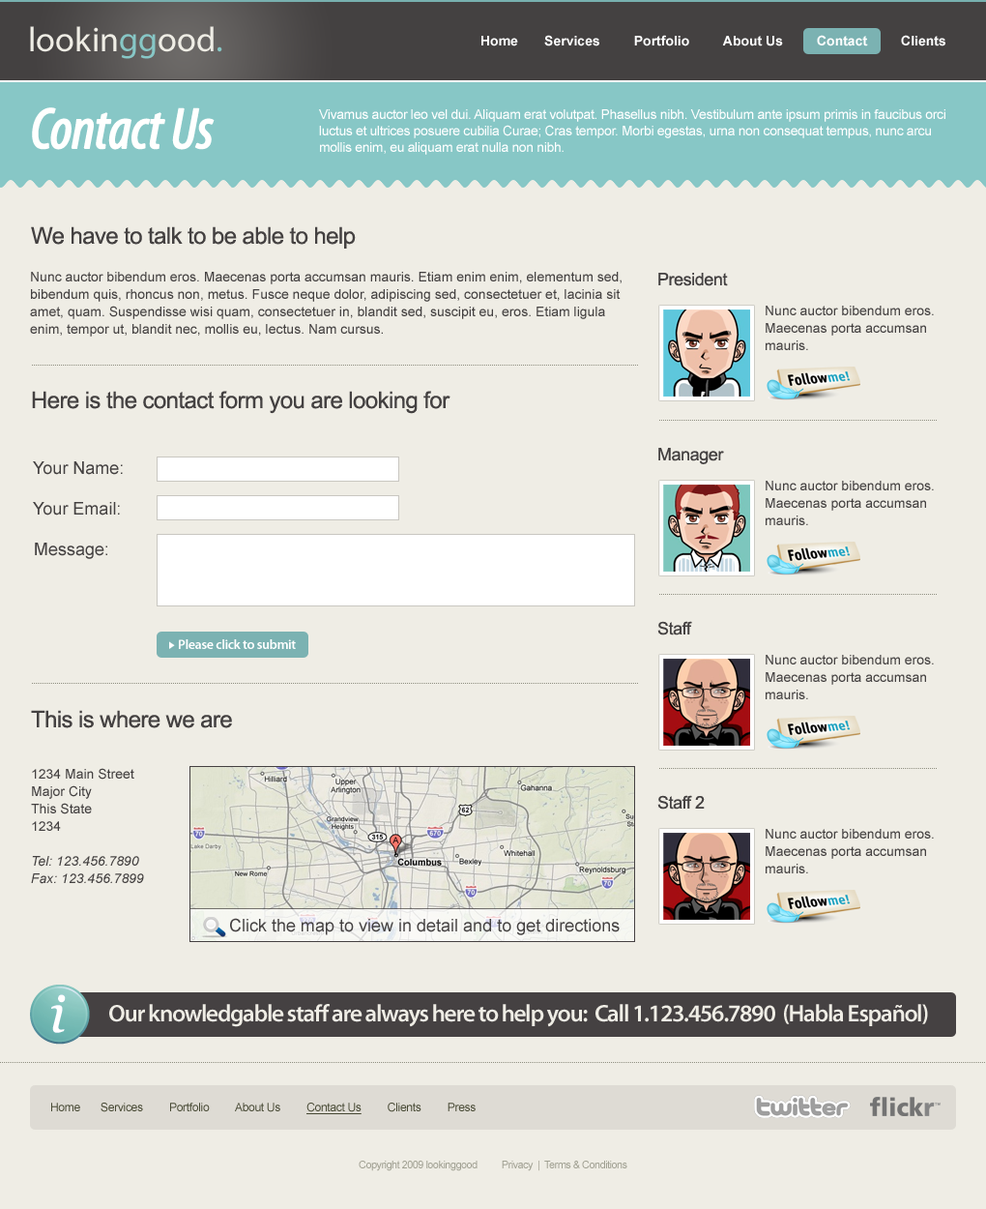
<style>
.page{position:relative;width:986px;height:1209px;background:#efede5}
.page>*{position:absolute;margin:0}
.t1{font:34.8px "MyriadPro-Regular";color:#efede5}
.t2{font:34.8px "MyriadPro-Regular";color:#87c7c6}
.t3{font:13.5px "Arial-BoldMT";color:#ffffff}
.t4{font:58px "MyriadPro-CondIt";letter-spacing:-0.025em;color:#fffffe;font-weight:bold}
.t5{font:13.5px "ArialMT";letter-spacing:-0.025em;color:#ffffff}
.t6{font:23.2px "ArialMT";letter-spacing:-0.025em;color:#444141}
.t7{font:13.5px/17.4px "ArialMT";color:#444141}
.t8{font:17.4px "ArialMT";letter-spacing:-0.025em;color:#444141}
.t9{font:17.4px "ArialMT";color:#444141}
.t10{font:13.5px "MyriadPro-Semibold";letter-spacing:-0.025em;color:#ffffff}
.t11{font:13.5px/17.4px "Arial-ItalicMT";color:#444141}
.t12{font:24.2px "MyriadPro-Semibold";letter-spacing:-0.05em;color:#efede5}
.t13{font:11.6px "ArialMT";letter-spacing:-0.025em;color:#464833}
.t14{font:11.6px "ArialMT";letter-spacing:-0.025em;color:#464833;text-decoration:underline}
.t15{font:10.6px "ArialMT";letter-spacing:-0.05em;color:#a1a193}
</style>
<div class="page">
<p class="t1" style="left:30px;top:26px;width:192px;height:33px">lookin<span class="t2">gg</span>ood<span class="t2">.</span></p>
<p class="t3" style="left:482px;top:35px;width:464px;height:11px">Home       Services         Portfolio         About Us         Contact         Clients</p>
<p class="t4" style="left:32px;top:107px;width:183px;height:43px">Contact Us</p>
<p class="t5" style="left:319px;top:109px;width:627px;height:46px">Vivamus auctor leo vel dui. Aliquam erat volutpat. Phasellus nibh. Vestibulum ante ipsum primis in faucibus orci luctus et ultrices posuere cubilia Curae; Cras tempor. Morbi egestas, urna non consequat tempus, nunc arcu mollis enim, eu aliquam erat nulla non nibh.</p>
<p class="t6" style="left:31px;top:226px;width:325px;height:23px">We have to talk to be able to help</p>
<p class="t7" style="left:30px;top:272px;width:592px;height:65px">Nunc auctor bibendum eros. Maecenas porta accumsan mauris. Etiam enim enim, elementum sed, bibendum quis, rhoncus non, metus. Fusce neque dolor, adipiscing sed, consectetuer et, lacinia sit amet, quam. Suspendisse wisi quam, consectetuer in, blandit sed, suscipit eu, eros. Etiam ligula enim, tempor ut, blandit nec, mollis eu, lectus. Nam cursus.</p>
<p class="t8" style="left:659px;top:273px;width:69px;height:13px">President</p>
<p class="t7" style="left:766px;top:306px;width:168px;height:44px">Nunc auctor bibendum eros. Maecenas porta accumsan mauris.</p>
<p class="t6" style="left:32px;top:391px;width:419px;height:23px">Here is the contact form you are looking for</p>
<p class="t8" style="left:659px;top:448px;width:65px;height:16px">Manager</p>
<p class="t9" style="left:33px;top:461px;width:90px;height:14px">Your Name:</p>
<p class="t7" style="left:766px;top:481px;width:168px;height:44px">Nunc auctor bibendum eros. Maecenas porta accumsan mauris.</p>
<p class="t9" style="left:33px;top:502px;width:87px;height:13px">Your Email:</p>
<p class="t9" style="left:35px;top:543px;width:72px;height:16px">Message:</p>
<p class="t8" style="left:658px;top:621px;width:34px;height:14px">Staff</p>
<p class="t10" style="left:179px;top:639px;width:117px;height:10px">Please click to submit</p>
<p class="t7" style="left:766px;top:655px;width:168px;height:44px">Nunc auctor bibendum eros. Maecenas porta accumsan mauris.</p>
<p class="t6" style="left:31px;top:710px;width:201px;height:18px">This is where we are</p>
<p class="t7" style="left:31px;top:768px;width:113px;height:116px">1234 Main Street<br>Major City<br>This State<br>1234<br><br><span class="t11">Tel: 123.456.7890<br>Fax: 123.456.7899</span></p>
<p class="t8" style="left:658px;top:795px;width:47px;height:14px">Staff 2</p>
<p class="t7" style="left:766px;top:829px;width:168px;height:44px">Nunc auctor bibendum eros. Maecenas porta accumsan mauris.</p>
<p class="t12" style="left:109px;top:1004px;width:819px;height:23px">Our knowledgable staff are always here to help you:  Call 1.123.456.7890  (Habla Español)</p>
<p class="t13" style="left:51px;top:1102px;width:425px;height:12px">Home       Services         Portfolio         About Us         <span class="t14">Contact Us</span>         Clients         Press</p>
<p class="t15" style="left:359px;top:1160px;width:269px;height:11px">Copyright 2009 lookinggood          Privacy  |  Terms &amp; Conditions</p>
</div>
